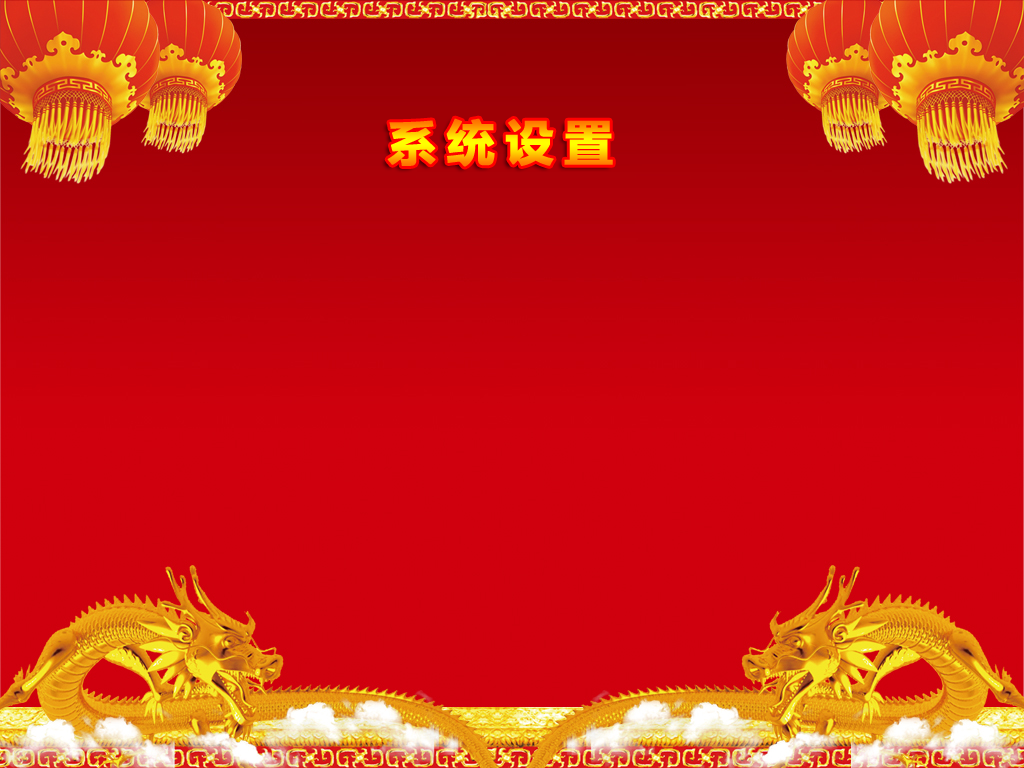
<style>
.page{position:relative;width:1024px;height:768px;background:#d0000e}
.page>*{position:absolute;margin:0}
.t1{font:48px "MicrosoftYaHei-Bold";letter-spacing:0.2em;font-weight:bold}
</style>
<div class="page">
<p class="t1" style="left:387px;top:118px;width:226px;height:49px">系统设置</p>
</div>
